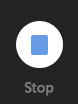
<style>
.page{position:relative;width:78px;height:104px;background:#232323}
.page>*{position:absolute;margin:0}
.t1{font:14px "SegoeUI";color:#7c7c7c;font-weight:bold}
</style>
<div class="page">
<p class="t1" style="left:25px;top:82px;width:29px;height:14px">Stop</p>
</div>
